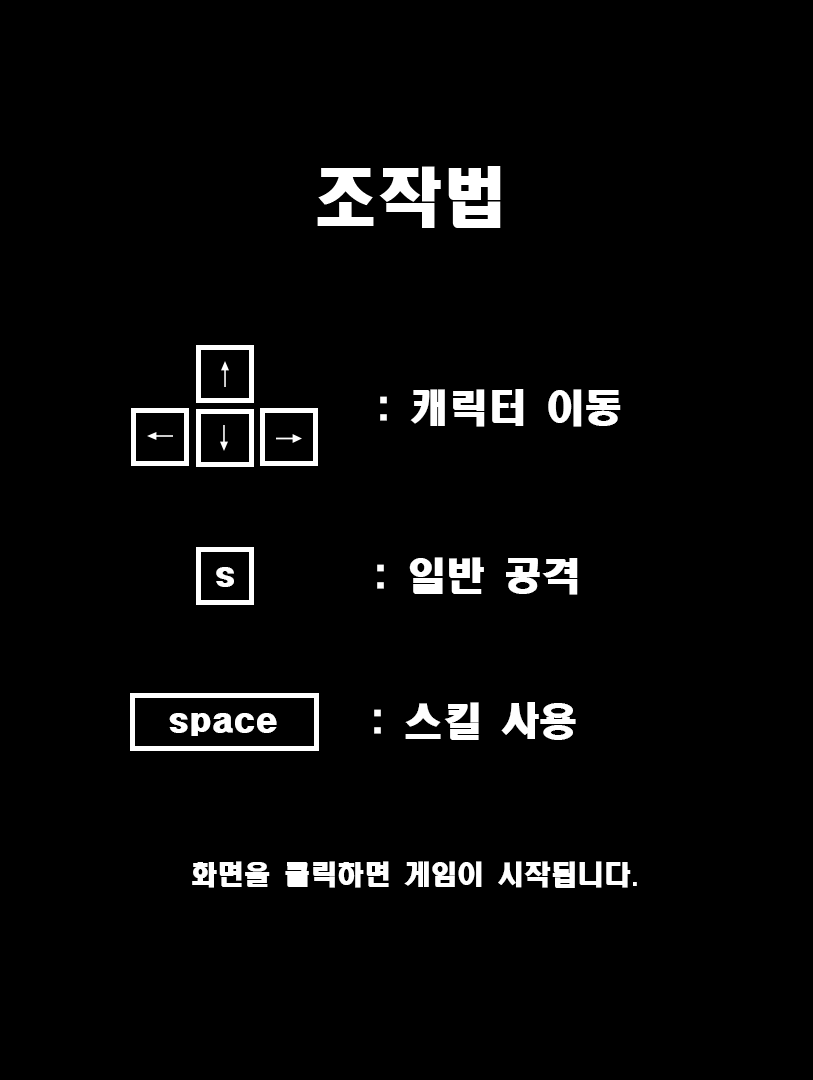
<style>
.page{position:relative;width:813px;height:1080px;background:#000000}
.page>*{position:absolute;margin:0}
.t1{font:38.7px "HeadlineR-HM";color:#ffffff}
.t2{font:31.3px "HeadlineR-HM";color:#ffffff}
.t3{font:26.7px "HeadlineR-HM";color:#ffffff}
</style>
<div class="page">
<p class="t1" style="left:380px;top:389px;width:241px;height:38px">: 캐릭터 이동</p>
<p class="t1" style="left:377px;top:557px;width:201px;height:38px">: 일반 공격</p>
<p class="t2" style="left:216px;top:567px;width:18px;height:20px">s</p>
<p class="t1" style="left:374px;top:702px;width:202px;height:38px">: 스킬 사용</p>
<p class="t2" style="left:169px;top:713px;width:108px;height:23px">space</p>
<p class="t3" style="left:192px;top:861px;width:445px;height:27px">화면을 클릭하면 게임이 시작됩니다.</p>
</div>
